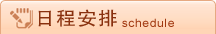
<style>
.page{position:relative;width:216px;height:34px}
.page>*{position:absolute;margin:0}
.t1{font:19.2px "FZHTK--GBK1-0";letter-spacing:0.055em;color:#89300e;scale:1.04 1}
.t2{font:11.5px "ArialMT";letter-spacing:0.055em;color:#a13810;scale:1.04 1}
</style>
<div class="page">
<p class="t1" style="left:38px;top:9px;width:79px;height:18px">日程安排</p>
<p class="t2" style="left:122px;top:18px;width:52px;height:9px">schedule</p>
</div>
